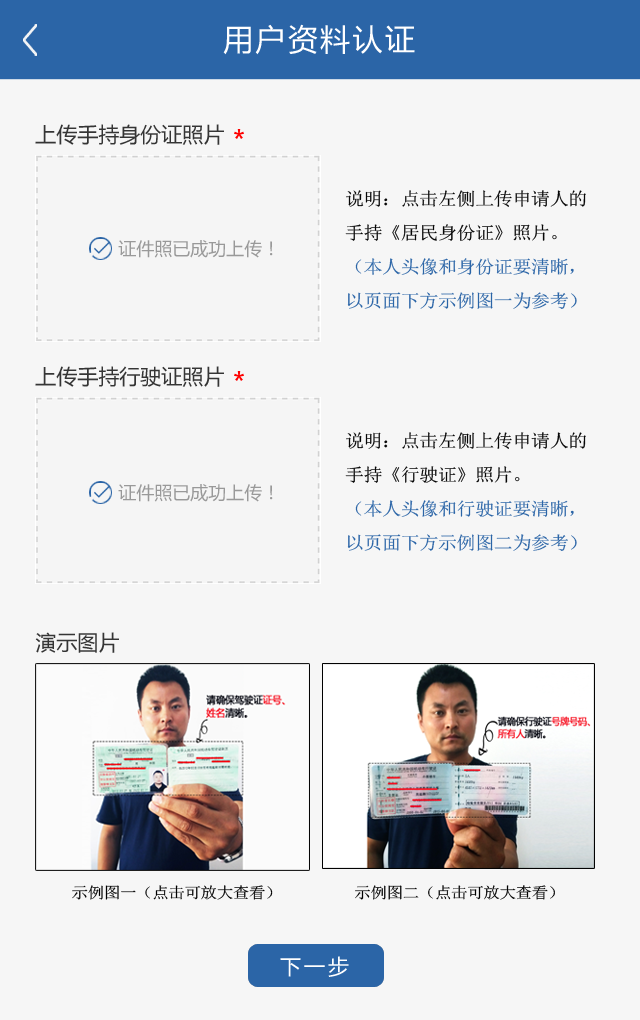
<style>
.page{position:relative;width:640px;height:1020px;background:#f6f6f6}
.page>*{position:absolute;margin:0}
.t1{font:30px "MicrosoftYaHei";letter-spacing:0.08em;color:#ffffff}
.t2{font:21px "MicrosoftYaHei";color:#353535}
.t3{font:18px/34px "SimSun";letter-spacing:-0.02em;color:#2b65a7;scale:1.06 1}
.t4{font:18px/34px "SimSun";letter-spacing:-0.02em;color:#060606;scale:1.06 1}
.t5{font:18px "MicrosoftYaHei";color:#999999}
.t6{font:15.6px "SimSun";letter-spacing:-0.02em;color:#000000;scale:1.06 1}
.t7{font:21px "MicrosoftYaHei";letter-spacing:0.14em;color:#ffffff}
</style>
<div class="page">
<p class="t1" style="left:223px;top:24px;width:192px;height:31px">用户资料认证</p>
<p class="t2" style="left:35px;top:124px;width:189px;height:21px">上传手持身份证照片</p>
<p class="t3" style="left:345px;top:190px;width:241px;height:119px"><span class="t4">说明：点击左侧上传申请人的手持《居民身份证》照片。<br></span>（本人头像和身份证要清晰，以页面下方示例图一为参考）</p>
<p class="t5" style="left:118px;top:240px;width:155px;height:18px">证件照已成功上传！</p>
<p class="t2" style="left:35px;top:366px;width:189px;height:21px">上传手持行驶证照片</p>
<p class="t3" style="left:345px;top:432px;width:241px;height:119px"><span class="t4">说明：点击左侧上传申请人的手持《行驶证》照片。<br></span>（本人头像和行驶证要清晰，以页面下方示例图二为参考）</p>
<p class="t5" style="left:118px;top:484px;width:155px;height:18px">证件照已成功上传！</p>
<p class="t2" style="left:35px;top:632px;width:84px;height:21px">演示图片</p>
<p class="t6" style="left:72px;top:885px;width:201px;height:15px">示例图一（点击可放大查看）</p>
<p class="t6" style="left:355px;top:885px;width:200px;height:15px">示例图二（点击可放大查看）</p>
<p class="t7" style="left:280px;top:956px;width:69px;height:21px">下一步</p>
</div>
